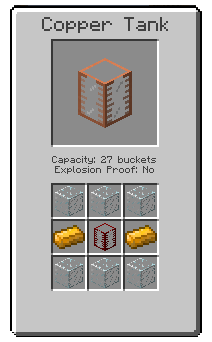
<style>
.page{position:relative;width:212px;height:342px;background:#c6c6c6}
.page>*{position:absolute;margin:0}
.t1{font:16px "Minecraftia";color:#404040}
.t2{font:8px "Minecraftia";color:#404040}
</style>
<div class="page">
<p class="t1" style="left:42px;top:17px;width:126px;height:16px">Copper Tank</p>
<p class="t2" style="left:52px;top:156px;width:104px;height:18px;text-align:center">Capacity: 27 buckets<br>Explosion Proof: No</p>
</div>
